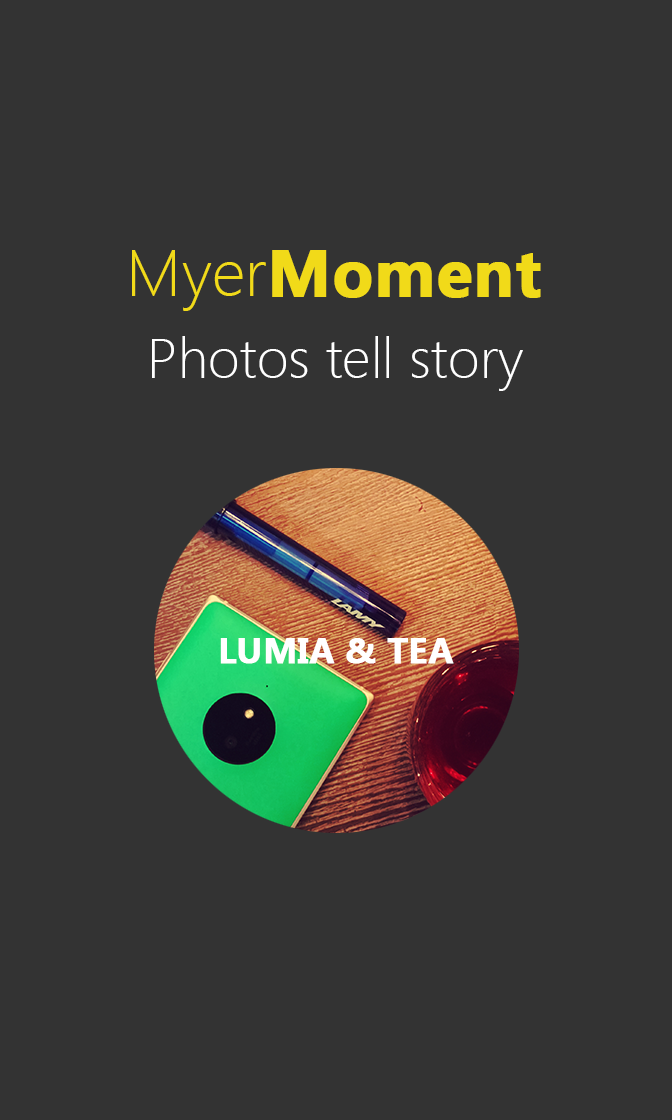
<style>
.page{position:relative;width:672px;height:1120px;background:#333333}
.page>*{position:absolute;margin:0}
.t1{font:61.5px "MicrosoftYaHeiUI-Bold";color:#f1da19;font-weight:bold}
.t2{font:61.5px "MicrosoftYaHeiUILight";color:#f1da19}
.t3{font:52.2px "MicrosoftYaHeiUILight";color:#ffffff}
.t4{font:32.8px "MicrosoftYaHeiUI-Bold";color:#ffffff;font-weight:bold}
</style>
<div class="page">
<p class="t1" style="left:132px;top:250px;width:409px;height:61px"><span class="t2">Myer</span>Moment</p>
<p class="t3" style="left:152px;top:336px;width:371px;height:55px">Photos tell story</p>
<p class="t4" style="left:220px;top:638px;width:234px;height:26px">LUMIA &amp; TEA</p>
</div>
